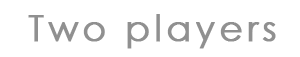
<style>
.page{position:relative;width:300px;height:57px;background:#ffffff}
.page>*{position:absolute;margin:0}
.t1{font:36px "CenturyGothic";letter-spacing:0.1em;color:#909090;font-weight:bold}
</style>
<div class="page">
<p class="t1" style="left:28px;top:14px;width:248px;height:35px">Two players</p>
</div>
